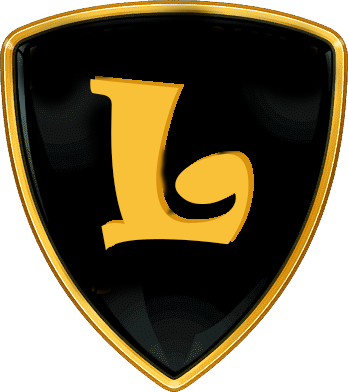
<style>
.page{position:relative;width:348px;height:392px;background:#000000}
.page>*{position:absolute;margin:0}
.t1{font:200px "Ravie";color:#f9c137}
</style>
<div class="page">
<p class="t1" style="left:90px;top:79px;width:159px;height:171px">L</p>
</div>
